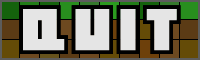
<style>
.page{position:relative;width:200px;height:60px;background:#e5e5e5}
.page>*{position:absolute;margin:0}
.t1{font:60px "Blocked";color:#000000}
</style>
<div class="page">
<p class="t1" style="left:19px;top:5px;width:162px;height:49px">quit</p>
</div>
